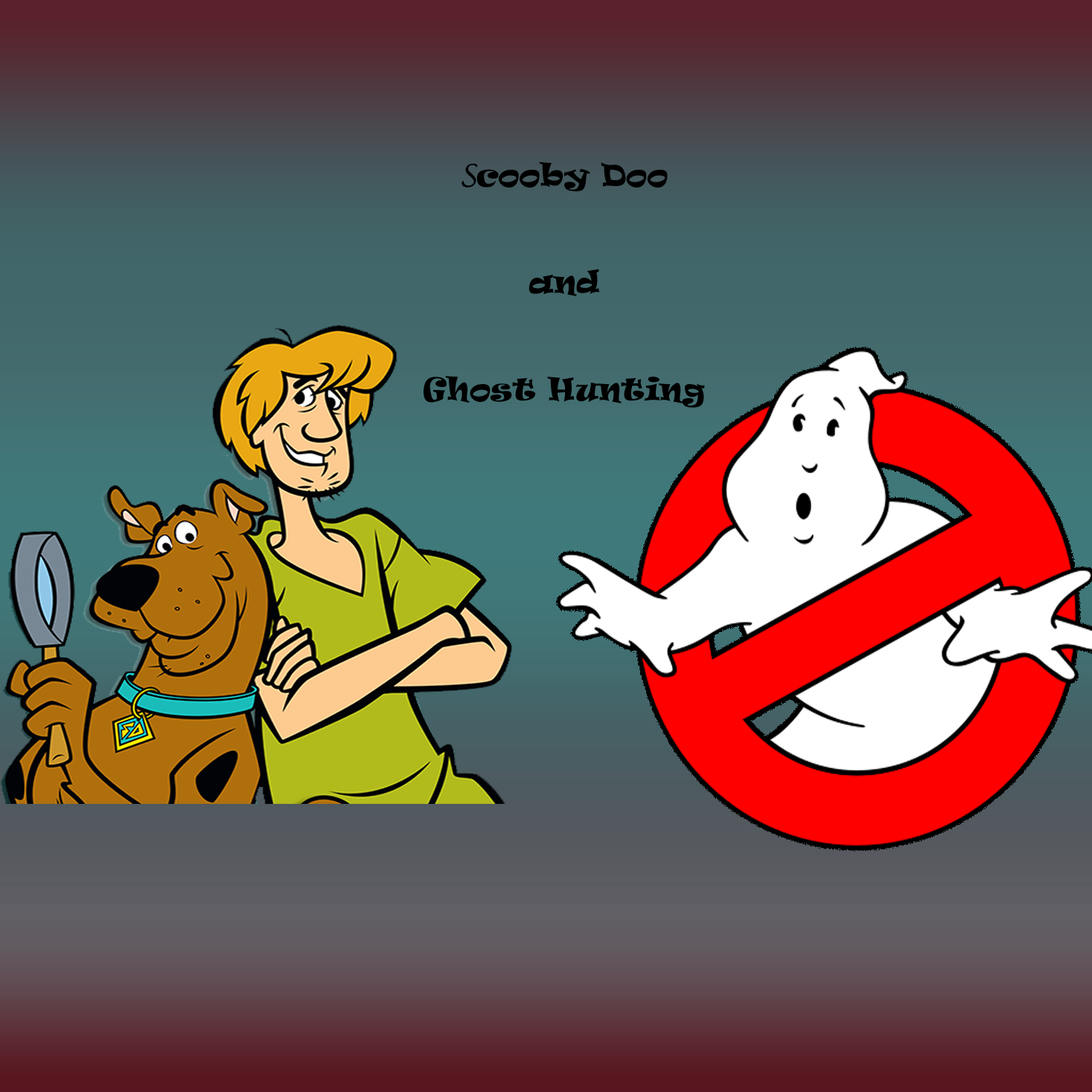
<style>
.page{position:relative;width:1092px;height:1092px}
.page>*{position:absolute;margin:0}
.t1{font:29.8px "Ravie";color:#000000}
.t2{font:29.8px "LucidaHandwriting-Italic";color:#000000}
</style>
<div class="page">
<p class="t1" style="left:424px;top:162px;width:281px;height:246px;text-align:center"><span class="t2">S</span>cooby Doo<br><br><br>and<br><br><br>Ghost Hunting<br>Ghost Hunting<br>Ghost Hunting</p>
</div>
